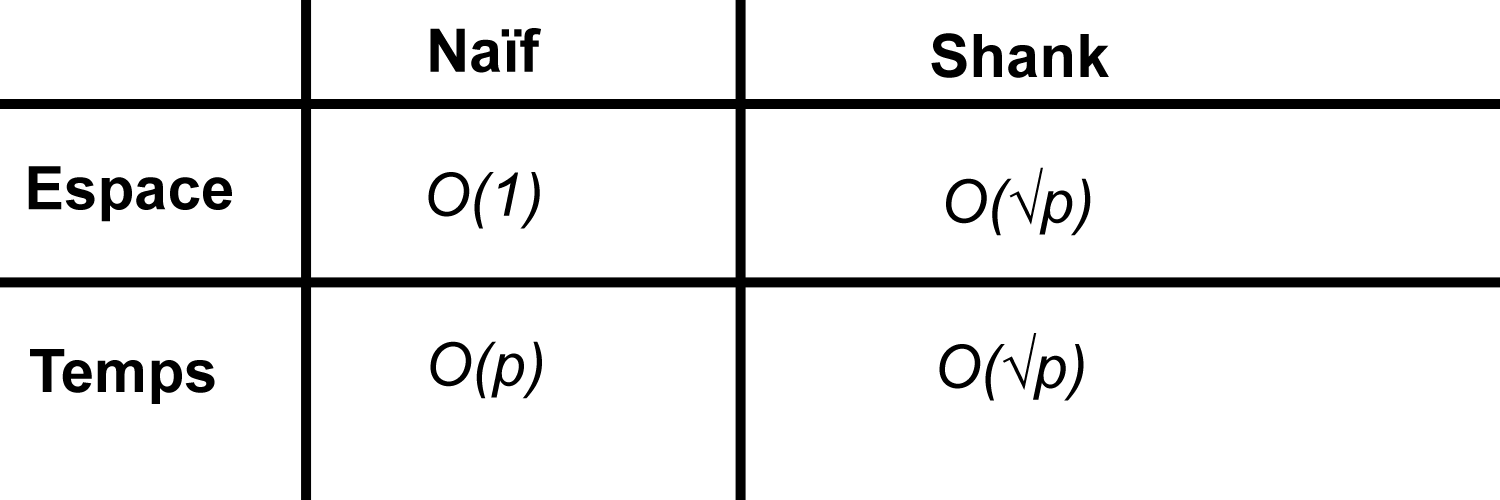
<style>
.page{position:relative;width:1500px;height:500px;background:#ffffff}
.page>*{position:absolute;margin:0}
.t1{font:60px "Arial-BoldMT";color:#000000}
.t2{font:60px "Arial-ItalicMT";color:#000000}
</style>
<div class="page">
<p class="t1" style="left:430px;top:28px;width:111px;height:45px">Naïf</p>
<p class="t1" style="left:931px;top:33px;width:178px;height:45px">Shank</p>
<p class="t1" style="left:28px;top:166px;width:204px;height:56px">Espace</p>
<p class="t2" style="left:428px;top:172px;width:112px;height:57px">O(1)</p>
<p class="t2" style="left:946px;top:167px;width:145px;height:69px">O(√p)</p>
<p class="t2" style="left:430px;top:341px;width:112px;height:58px">O(p)</p>
<p class="t2" style="left:939px;top:333px;width:145px;height:68px">O(√p)</p>
<p class="t1" style="left:30px;top:349px;width:185px;height:55px">Temps</p>
</div>
